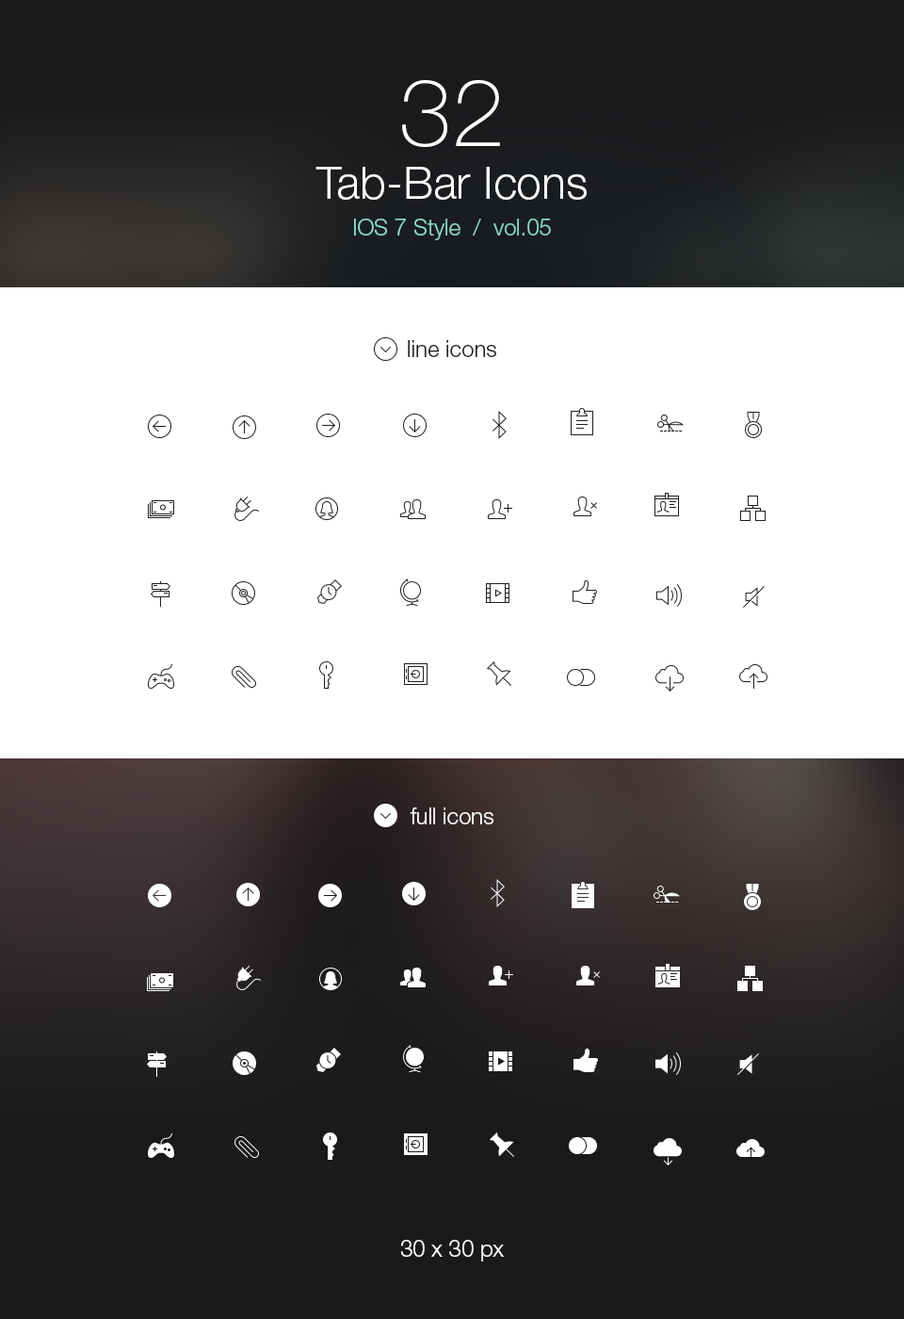
<style>
.page{position:relative;width:904px;height:1319px;background:#ffffff}
.page>*{position:absolute;margin:0}
.t1{font:22.6px/36.7px "HelveticaNeueLTStd-Lt";color:#85dac7}
.t2{font:94.2px/47.1px "HelveticaNeueLTStd-Th";color:#ffffff}
.t3{font:45.2px/52.7px "HelveticaNeueLTStd-Lt";color:#ffffff}
.t4{font:22.6px "HelveticaNeueLTStd-Lt";color:#1c2021}
.t5{font:22.6px "HelveticaNeueLTStd-Lt";color:#ffffff}
</style>
<div class="page">
<p class="t1" style="left:316px;top:80px;width:271px;height:160px;text-align:center"><span class="t2">32<br></span><span class="t3">Tab-Bar Icons<br></span>IOS 7 Style  /  vol.05</p>
<p class="t4" style="left:408px;top:340px;width:88px;height:17px">line icons</p>
<p class="t5" style="left:410px;top:807px;width:84px;height:17px">full icons</p>
<p class="t5" style="left:401px;top:1240px;width:103px;height:21px">30 x 30 px</p>
</div>
